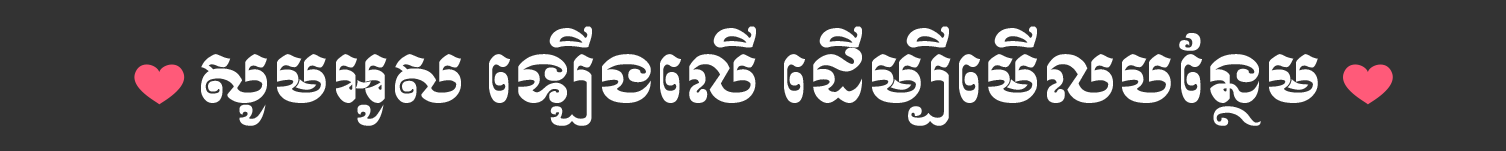
<style>
.page{position:relative;width:1506px;height:151px;background:#333333}
.page>*{position:absolute;margin:0}
.t1{font:66.8px "KhmerOSMoul";color:#ffffff}
.t2{font:53px "EmojiOneColor";color:#010101}
</style>
<div class="page">
<p class="t1" style="left:134px;top:26px;width:1259px;height:100px"><span class="t2">❤️ </span>សូមអូស ឡើងលើ ដើម្បីមើលបន្ថែម <span class="t2">❤️</span></p>
</div>
